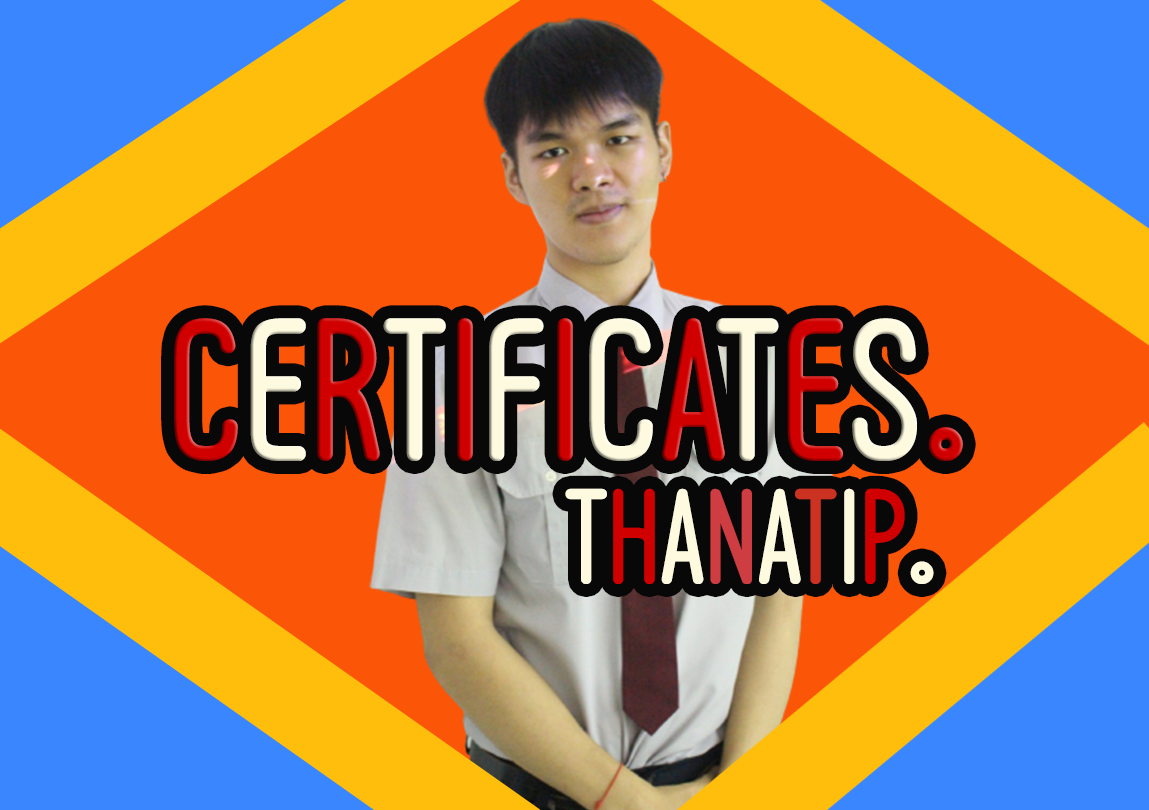
<style>
.page{position:relative;width:1149px;height:810px;background:#fb5607}
.page>*{position:absolute;margin:0}
.t1{font:240px "FCGalaxyRegular";color:#d00000}
.t2{font:240px "FCGalaxyRegular";color:#fefae0}
.t3{font:160px "FCGalaxyRegular";color:#fefae0}
.t4{font:160px "FCGalaxyRegular";color:#d00000}
.t5{font:160px "FCGalaxyRegular";color:#cd3d41}
.t6{font:160px "FCGalaxyRegular";color:#cc3221}
</style>
<div class="page">
<p class="t1" style="left:174px;top:318px;width:789px;height:143px">C<span class="t2">E</span>R<span class="t2">T</span>I<span class="t2">F</span>I<span class="t2">C</span>A<span class="t2">T</span>E<span class="t2">S</span>.</p>
<p class="t3" style="left:565px;top:488px;width:369px;height:96px">T<span class="t4">H</span>A<span class="t5">N</span>A<span class="t6">T</span>I<span class="t4">P</span>.</p>
</div>
